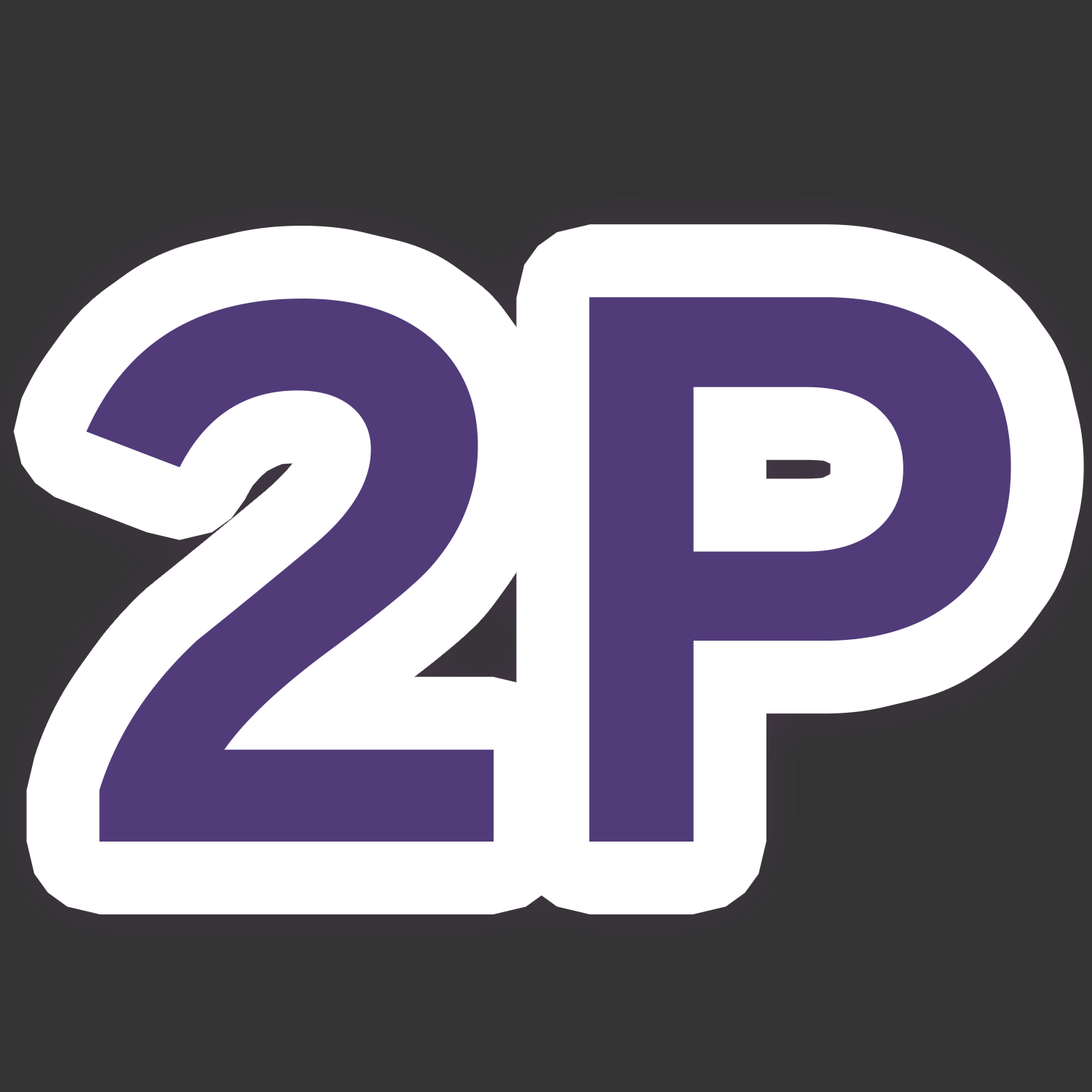
<style>
.page{position:relative;width:1092px;height:1092px;background:#333333}
.page>*{position:absolute;margin:0}
.t1{font:685.5px "NitalagoRuika-06";color:#513b79}
</style>
<div class="page">
<p class="t1" style="left:86px;top:297px;width:925px;height:545px">2P</p>
</div>
